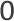
<style>
.page{position:relative;width:14px;height:21px;background:#ffffff}
.page>*{position:absolute;margin:0}
.t1{font:30px "Calibri";color:#3c3c3c}
</style>
<div class="page">
<p class="t1" style="left:0px;top:0px;width:14px;height:21px">0</p>
</div>
